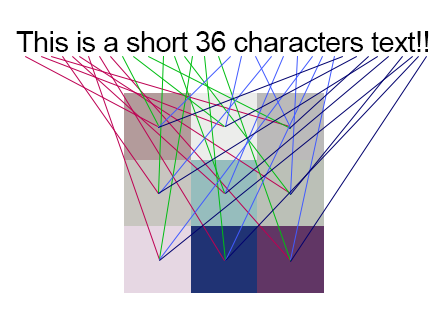
<style>
.page{position:relative;width:448px;height:331px;background:#ffffff}
.page>*{position:absolute;margin:0}
.t1{font:29px "ArialMT";letter-spacing:-0.02em;color:#000000}
</style>
<div class="page">
<p class="t1" style="left:16px;top:31px;width:413px;height:21px">This is a short 36 characters text!!</p>
</div>
